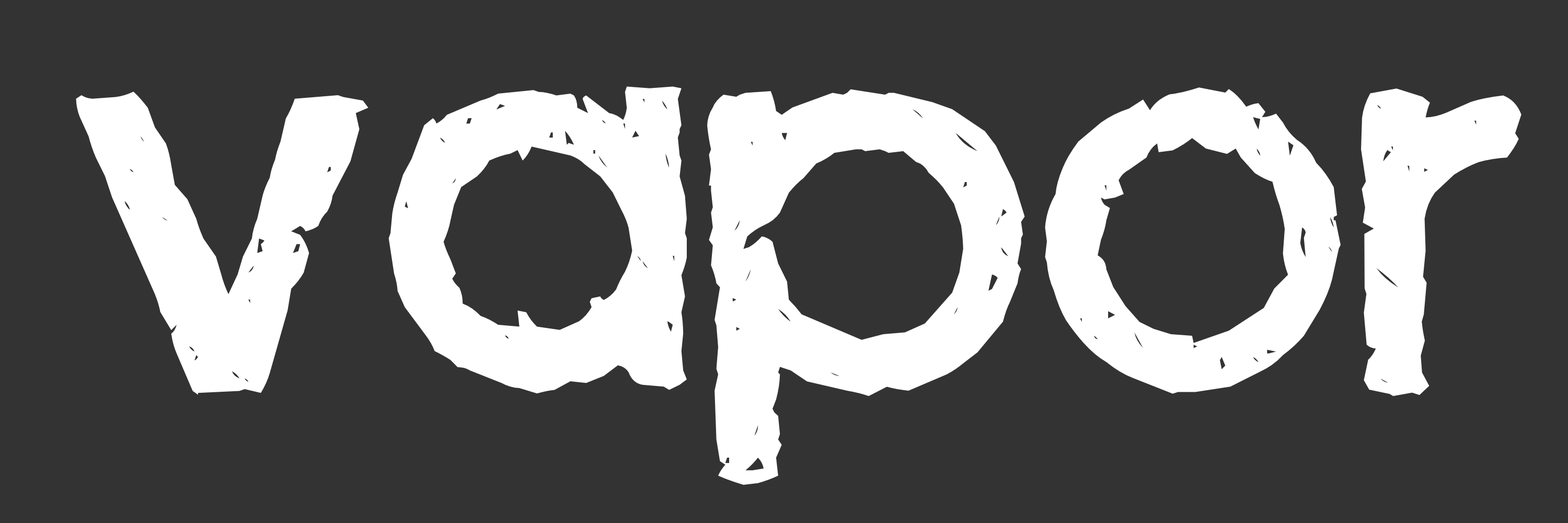
<style>
.page{position:relative;width:1568px;height:523px;background:#333333}
.page>*{position:absolute;margin:0}
.t1{font:522.7px "Xenophone";color:#ffffff}
</style>
<div class="page">
<p class="t1" style="left:76px;top:86px;width:1445px;height:399px">vapor</p>
</div>
